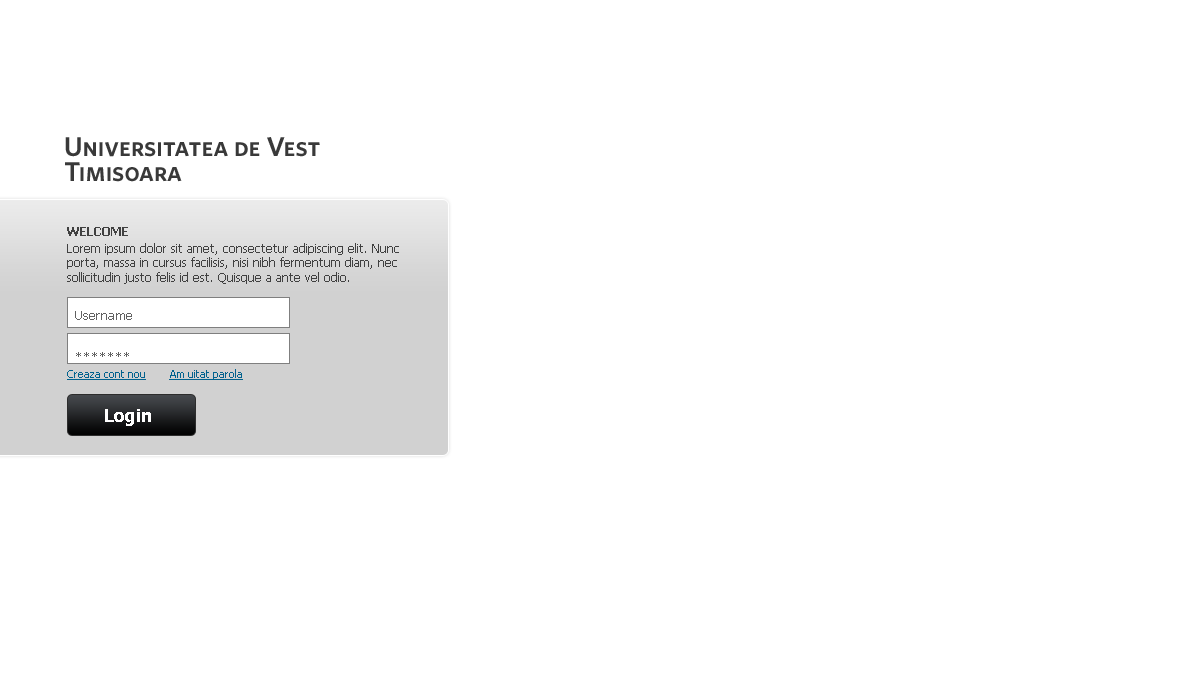
<style>
.page{position:relative;width:1200px;height:700px;background:#ffffff}
.page>*{position:absolute;margin:0}
.t1{font:27px/25px "WhitneyHTF-SemiBoldSC";color:#393939}
.t2{font:12px "Tahoma";color:#404040}
.t3{font:13px "Tahoma-Bold";color:#404040;text-transform:uppercase}
.t4{font:12px/17px "Tahoma";color:#404040}
.t5{font:13px/42px "Tahoma";color:#616161}
.t6{font:11px "Tahoma";color:#02628e;text-decoration:underline}
.t7{font:18px "Tahoma-Bold";color:#ffffff}
</style>
<div class="page">
<p class="t1" style="left:65px;top:137px;width:255px;height:45px">Universitatea de Vest<br>Timisoara</p>
<p class="t2" style="left:67px;top:227px;width:332px;height:57px"><span class="t3">Welcome<br></span><span class="t4">Lorem ipsum dolor sit amet, </span>consectetur adipiscing elit. Nunc porta, massa in cursus facilisis, nisi nibh fermentum diam, nec sollicitudin justo felis id est. Quisque a ante vel odio.</p>
<p class="t5" style="left:75px;top:311px;width:57px;height:46px">Username<br>*******</p>
<p class="t6" style="left:67px;top:369px;width:176px;height:11px">Creaza cont nou        Am uitat parola</p>
<p class="t7" style="left:105px;top:409px;width:46px;height:17px">Login</p>
</div>
